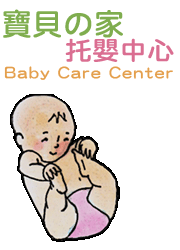
<style>
.page{position:relative;width:180px;height:250px;background:#ffffff}
.page>*{position:absolute;margin:0}
.t1{font:30.4px "DFNYuan-MXB-HKP-BF";color:#7fad4e}
.t2{font:25.4px "DFNYuan-MXB-HKP-BF";color:#da6e91;scale:1.08 1}
.t3{font:15.4px "DFNYuan-MXB-HKP-BF";letter-spacing:0.1em;color:#e49f4c}
</style>
<div class="page">
<p class="t1" style="left:3px;top:9px;width:120px;height:29px">寶 貝 の 家</p>
<p class="t2" style="left:65px;top:38px;width:109px;height:24px">托嬰中心</p>
<p class="t3" style="left:4px;top:66px;width:169px;height:14px">Baby Care Center</p>
</div>
